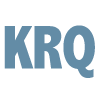
<style>
.page{position:relative;width:100px;height:100px;background:#ffffff}
.page>*{position:absolute;margin:0}
.t1{font:61.7px "AbadiMT-CondensedExtraBold";color:#638ca6}
</style>
<div class="page">
<p class="t1" style="left:4px;top:25px;width:91px;height:53px">KRQ</p>
</div>
